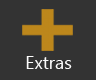
<style>
.page{position:relative;width:96px;height:80px;background:#333333}
.page>*{position:absolute;margin:0}
.t1{font:18px "SegoeUI";color:#fcfcfc}
</style>
<div class="page">
<p class="t1" style="left:26px;top:56px;width:46px;height:13px">Extras</p>
</div>
